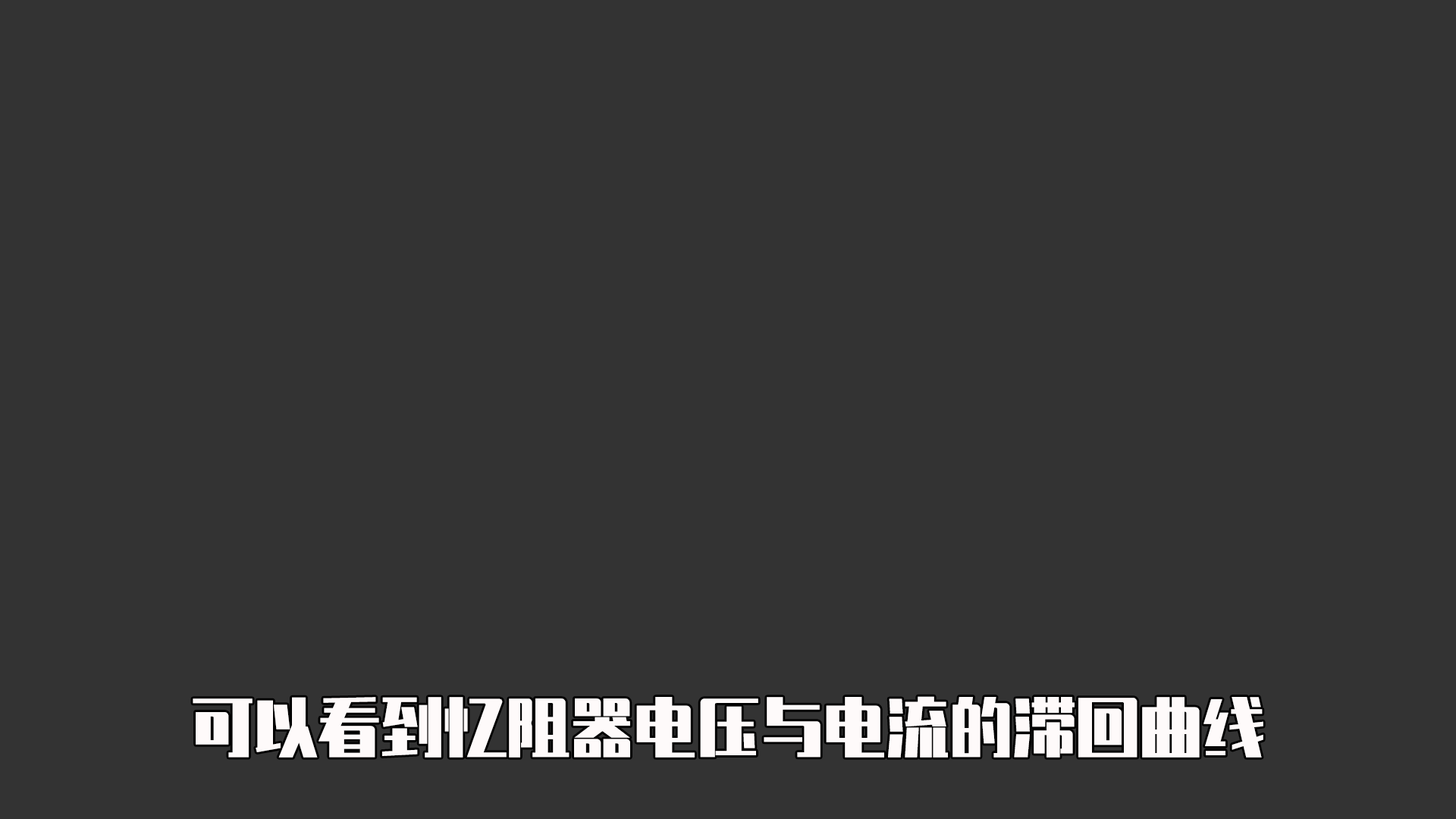
<style>
.page{position:relative;width:1456px;height:819px;background:#333333}
.page>*{position:absolute;margin:0}
.t1{font:63.2px "ZhenyanGB-Regular";color:#fefafa}
</style>
<div class="page">
<p class="t1" style="left:193px;top:696px;width:1070px;height:62px">可以看到忆阻器电压与电流的滞回曲线</p>
</div>
